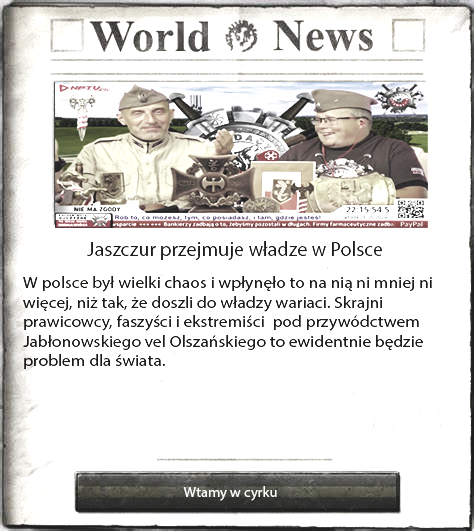
<style>
.page{position:relative;width:474px;height:531px;background:#ffffff}
.page>*{position:absolute;margin:0}
.t1{font:20px "MyriadPro-Regular";color:#1d1d1d}
.t2{font:16.3px "MyriadPro-Regular";color:#1d1d1d;scale:1.07 1}
.t3{font:14.6px "MyriadPro-Regular";color:#ffffff}
</style>
<div class="page">
<p class="t1" style="left:87px;top:241px;width:295px;height:19px">Jaszczur przejmuje władze w Polsce</p>
<p class="t2" style="left:23px;top:276px;width:409px;height:93px">W polsce był wielki chaos i wpłynęło to na nią ni mniej ni więcej, niż tak, że doszli do władzy wariaci. Skrajni prawicowcy, faszyści i ekstremiści  pod przywódctwem Jabłonowskiego vel Olszańskiego to ewidentnie będzie problem dla świata.</p>
<p class="t3" style="left:183px;top:486px;width:94px;height:15px">Wtamy w cyrku</p>
</div>
